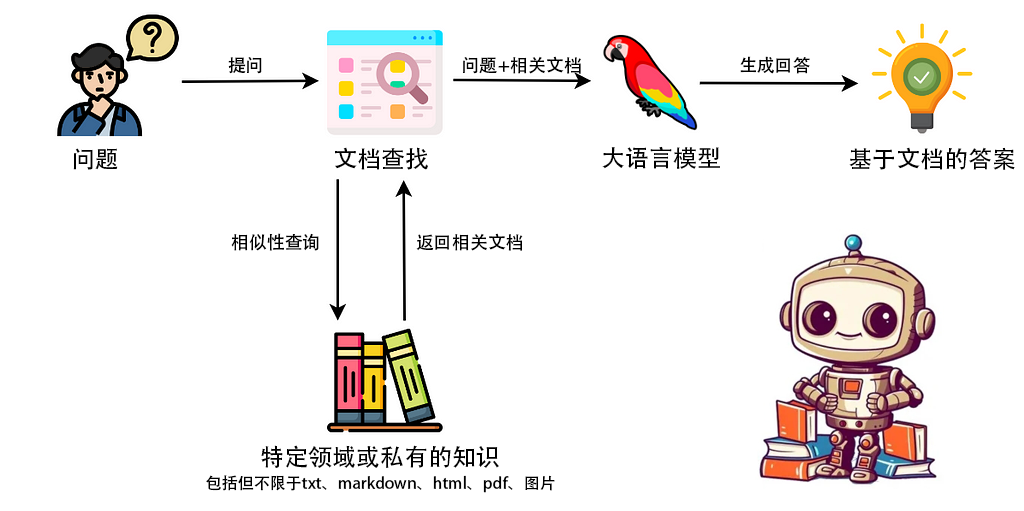
<style>
.page{position:relative;width:1024px;height:511px;background:#ffffff}
.page>*{position:absolute;margin:0}
.t1{font:18px "AdobeHeitiStd-Regular";color:#000000}
.t2{font:24px "AdobeHeitiStd-Regular";color:#000000}
.t3{font:16px "AdobeHeitiStd-Regular";color:#000000}
</style>
<div class="page">
<p class="t1" style="left:228px;top:57px;width:34px;height:17px">提问</p>
<p class="t1" style="left:463px;top:56px;width:118px;height:18px">问题+相关文档</p>
<p class="t1" style="left:740px;top:56px;width:70px;height:18px">生成回答</p>
<p class="t2" style="left:73px;top:148px;width:45px;height:22px">问题</p>
<p class="t2" style="left:335px;top:147px;width:93px;height:23px">文档查找</p>
<p class="t2" style="left:602px;top:146px;width:118px;height:23px">大语言模型</p>
<p class="t2" style="left:849px;top:147px;width:166px;height:23px">基于文档的答案</p>
<p class="t1" style="left:231px;top:233px;width:88px;height:18px">相似性查询</p>
<p class="t1" style="left:416px;top:233px;width:107px;height:18px">返回相关文档</p>
<p class="t2" style="left:261px;top:445px;width:238px;height:23px">特定领域或私有的知识</p>
<p class="t3" style="left:206px;top:475px;width:349px;height:18px">包括但不限于txt、markdown、html、pdf、图片</p>
</div>
